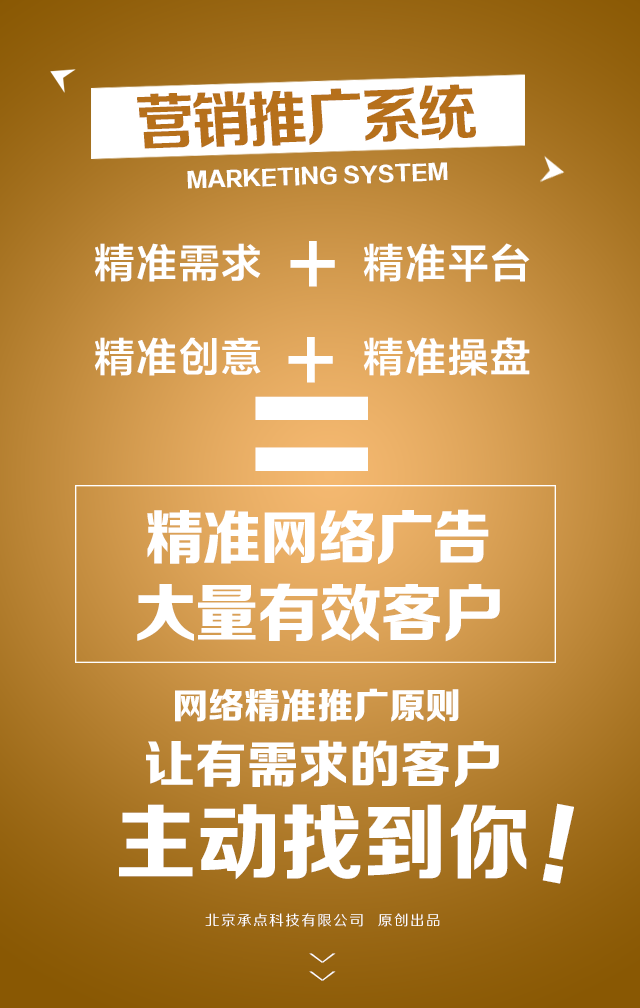
<style>
.page{position:relative;width:640px;height:1008px}
.page>*{position:absolute;margin:0}
.t1{font:61.4px "FZZCHJW--GB1-0";letter-spacing:-0.05em;color:#b6701b;text-transform:uppercase;scale:0.97 1}
.t2{font:20.7px "FZZDHJW--GB1-0";letter-spacing:0.005em;color:#ffffff;text-transform:uppercase}
.t3{font:40.6px "FZLTZCHK--GBK1-0";letter-spacing:0.05em;color:#ffffff;text-transform:uppercase}
.t4{font:80px "FZLTCHJW--GB1-0";letter-spacing:0.5em;color:#ffffff;text-transform:uppercase}
.t5{font:191.6px "FZZDHJW--GB1-0";letter-spacing:-0.025em;color:#ffffff;text-transform:uppercase}
.t6{font:59.4px "FZZDHJW--GB1-0";letter-spacing:-0.025em;color:#ffffff;text-transform:uppercase}
.t7{font:63.6px "FZZDHJW--GB1-0";letter-spacing:-0.025em;color:#ffffff;text-transform:uppercase}
.t8{font:36px "FZZDHJW--GB1-0";color:#ffffff;text-transform:uppercase}
.t9{font:51.3px "FZZDHJW--GB1-0";color:#ffffff;text-transform:uppercase}
.t10{font:82.8px "FZZDHJW--GB1-0";color:#ffffff;text-transform:uppercase}
.t11{font:92.4px "FZZDHJW--GB1-0";color:#ffffff;text-transform:uppercase}
.t12{font:14.2px "FZZHJW--GB1-0";letter-spacing:0.1em;color:#ffffff;text-transform:uppercase}
.t13{font:36.8px "FZZXHJW--GB1-0";letter-spacing:0.5em;color:#ffffff;text-transform:uppercase;scale:0.44 1}
</style>
<div class="page">
<p class="t1" style="left:137px;top:84px;width:339px;height:65px;rotate:-2deg">营销推广系统</p>
<p class="t2" style="left:187px;top:162px;width:261px;height:27px;rotate:-2deg">Marketing system</p>
<p class="t3" style="left:94px;top:243px;width:167px;height:39px">精准需求</p>
<p class="t4" style="left:290px;top:241px;width:45px;height:46px">+</p>
<p class="t3" style="left:363px;top:243px;width:167px;height:39px">精准平台</p>
<p class="t3" style="left:94px;top:337px;width:167px;height:39px">精准创意</p>
<p class="t4" style="left:288px;top:337px;width:45px;height:46px">+</p>
<p class="t3" style="left:363px;top:337px;width:167px;height:39px">精准操盘</p>
<p class="t5" style="left:255px;top:396px;width:113px;height:75px">=</p>
<p class="t6" style="left:147px;top:509px;width:342px;height:55px">精准网络广告</p>
<p class="t7" style="left:137px;top:583px;width:363px;height:59px">大量有效客户</p>
<p class="t8" style="left:175px;top:688px;width:284px;height:34px">网络精准推广原则</p>
<p class="t9" style="left:146px;top:740px;width:353px;height:47px">让有需求的客户</p>
<p class="t10" style="left:119px;top:804px;width:408px;height:76px">主动找到你</p>
<p class="t11" style="left:542px;top:803px;width:32px;height:81px;rotate:11deg">!</p>
<p class="t12" style="left:205px;top:913px;width:235px;height:14px">北京承点科技有限公司  原创出品</p>
<p class="t13" style="left:309px;top:953px;width:27px;height:28px;rotate:90deg">&gt;&gt;</p>
</div>
